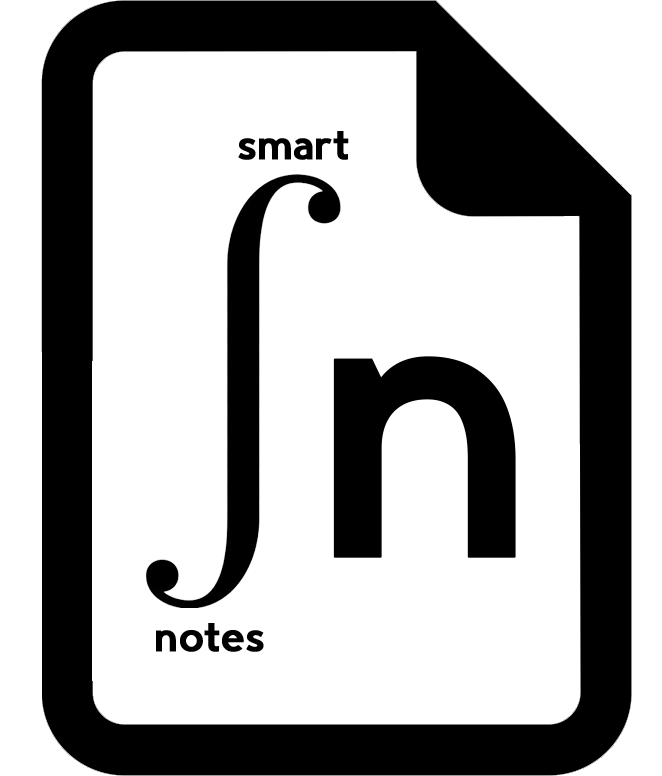
<style>
.page{position:relative;width:662px;height:776px;background:#ffffff}
.page>*{position:absolute;margin:0}
.t1{font:39.5px "Triomphe-Regular";color:#000000;font-weight:bold}
.t2{font:380.6px "Triomphe-Regular";color:#000000;font-weight:bold}
</style>
<div class="page">
<p class="t1" style="left:238px;top:131px;width:111px;height:29px">smart</p>
<p class="t2" style="left:333px;top:356px;width:183px;height:202px">n</p>
<p class="t1" style="left:156px;top:623px;width:108px;height:29px">notes</p>
</div>
